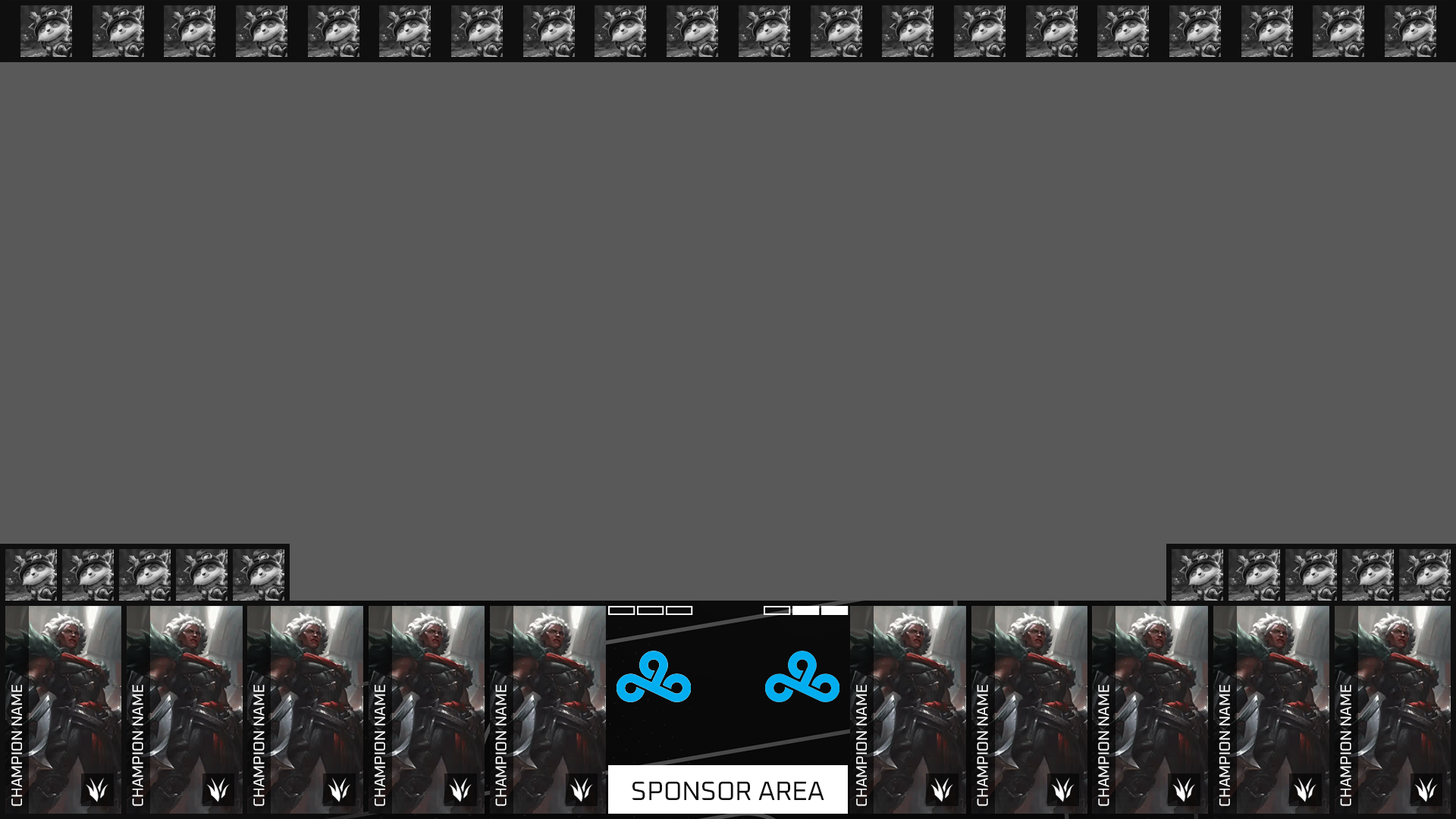
<style>
.page{position:relative;width:1456px;height:819px;background:#595959}
.page>*{position:absolute;margin:0}
.t1{font:15px "Oxanium-Regular";color:#ffffff;text-transform:uppercase}
.t2{font:26.5px "Oxanium-Regular";color:#0f0f0f;text-transform:uppercase}
</style>
<div class="page">
<p class="t1" style="left:11px;top:685px;width:11px;height:121px;rotate:-90deg">champion name</p>
<p class="t1" style="left:132px;top:685px;width:11px;height:121px;rotate:-90deg">champion name</p>
<p class="t1" style="left:253px;top:685px;width:12px;height:121px;rotate:-90deg">champion name</p>
<p class="t1" style="left:375px;top:685px;width:10px;height:121px;rotate:-90deg">champion name</p>
<p class="t1" style="left:495px;top:685px;width:12px;height:121px;rotate:-90deg">champion name</p>
<p class="t1" style="left:856px;top:685px;width:11px;height:121px;rotate:-90deg">champion name</p>
<p class="t1" style="left:977px;top:685px;width:11px;height:121px;rotate:-90deg">champion name</p>
<p class="t1" style="left:1098px;top:685px;width:11px;height:121px;rotate:-90deg">champion name</p>
<p class="t1" style="left:1219px;top:685px;width:11px;height:121px;rotate:-90deg">champion name</p>
<p class="t1" style="left:1340px;top:685px;width:11px;height:121px;rotate:-90deg">champion name</p>
<p class="t2" style="left:632px;top:781px;width:192px;height:19px">SPONSOR AREA</p>
</div>
